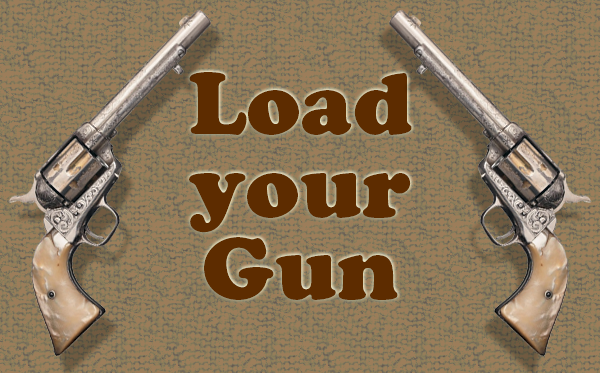
<style>
.page{position:relative;width:600px;height:373px}
.page>*{position:absolute;margin:0}
.t1{font:86.9px/82.7px "CooperBlackStd";color:#5d2c00}
</style>
<div class="page">
<p class="t1" style="left:189px;top:72px;width:223px;height:228px;text-align:center">Load<br>your<br>Gun</p>
</div>
